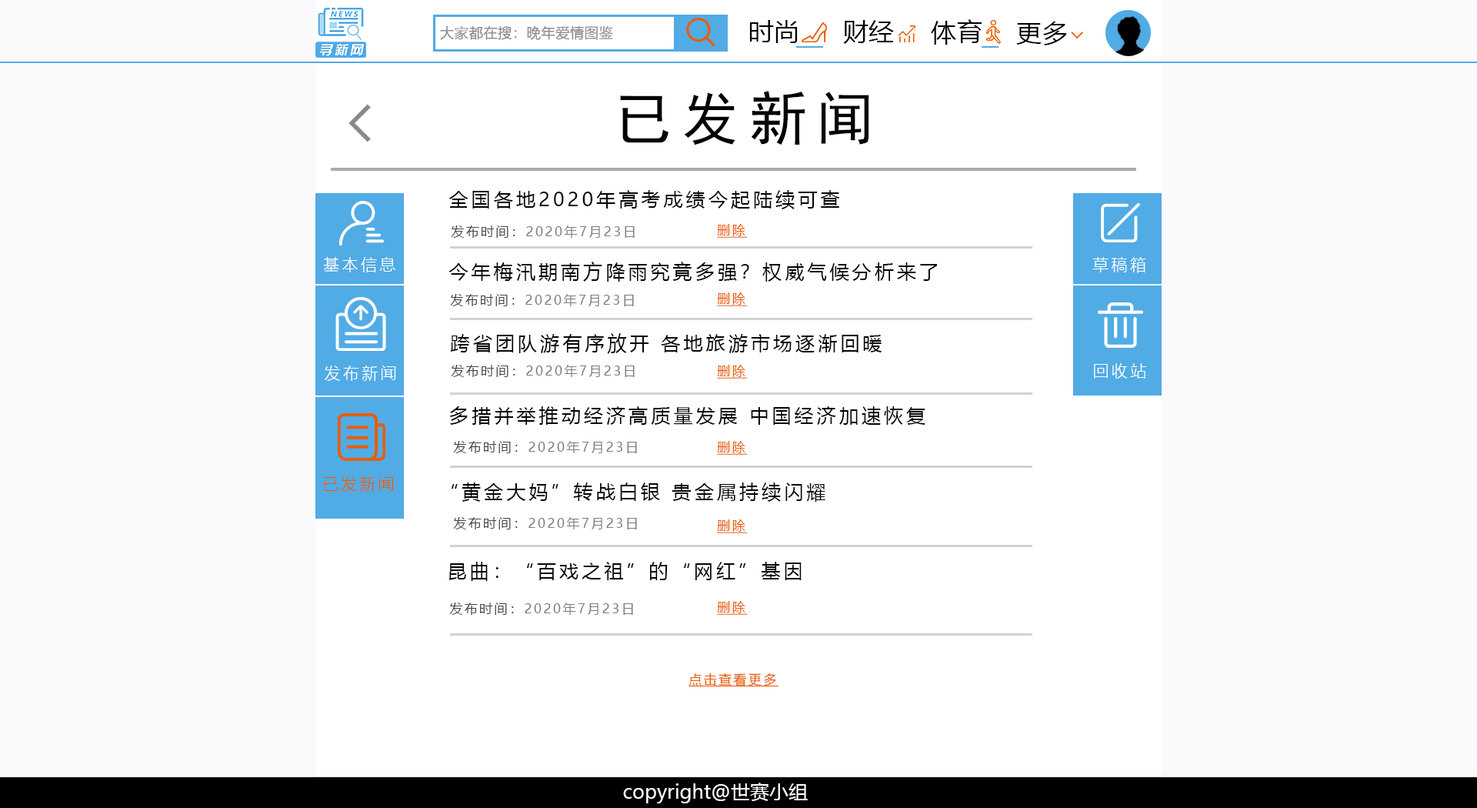
<style>
.page{position:relative;width:1477px;height:808px;background:#ffffff}
.page>*{position:absolute;margin:0}
.t1{font:14.1px "MicrosoftYaHeiLight";color:#8f8f8f;font-weight:bold}
.t2{font:25.6px "MicrosoftYaHei";color:#000000}
.t3{font:57.7px "SimHei";letter-spacing:0.165em;color:#000203}
.t4{font:19.2px "MicrosoftYaHei";letter-spacing:0.165em;color:#070401}
.t5{font:12.8px "MicrosoftYaHei";letter-spacing:0.165em;color:#807d7b}
.t6{font:12.8px "MicrosoftYaHei";letter-spacing:0.165em;color:#474544}
.t7{font:12.8px "MicrosoftYaHei";letter-spacing:0.165em;color:#eb5c00;text-decoration:underline}
.t8{font:16px "MicrosoftYaHeiLight";letter-spacing:0.165em;color:#fefefe}
.t9{font:16px "MicrosoftYaHeiLight";letter-spacing:0.165em;color:#ffffff}
.t10{font:16px "MicrosoftYaHeiLight";letter-spacing:0.165em;color:#ec5c00}
.t11{font:19.2px "MicrosoftYaHei";color:#fefefe}
</style>
<div class="page">
<p class="t1" style="left:440px;top:26px;width:173px;height:14px">大家都在搜：晚年爱情图鉴</p>
<p class="t2" style="left:749px;top:20px;width:49px;height:23px">时尚</p>
<p class="t2" style="left:843px;top:20px;width:51px;height:24px">财经</p>
<p class="t2" style="left:931px;top:19px;width:51px;height:26px">体育</p>
<p class="t2" style="left:1016px;top:22px;width:50px;height:23px">更多</p>
<p class="t3" style="left:620px;top:91px;width:249px;height:54px">已发新闻</p>
<p class="t4" style="left:448px;top:190px;width:392px;height:19px">全国各地2020年高考成绩今起陆续可查</p>
<p class="t5" style="left:451px;top:225px;width:183px;height:13px"><span class="t6">发布时间：</span>2020年7月23日</p>
<p class="t7" style="left:717px;top:224px;width:31px;height:14px">删除</p>
<p class="t8" style="left:323px;top:256px;width:72px;height:16px">基本信息</p>
<p class="t8" style="left:1092px;top:257px;width:54px;height:16px">草稿箱</p>
<p class="t4" style="left:448px;top:261px;width:489px;height:20px">今年梅汛期南方降雨究竟多强？权威气候分析来了</p>
<p class="t5" style="left:450px;top:294px;width:184px;height:12px"><span class="t6">发布时间：</span>2020年7月23日</p>
<p class="t7" style="left:717px;top:292px;width:31px;height:14px">删除</p>
<p class="t4" style="left:450px;top:333px;width:431px;height:21px">跨省团队游有序放开 各地旅游市场逐渐回暖</p>
<p class="t8" style="left:324px;top:365px;width:72px;height:16px">发布新闻</p>
<p class="t5" style="left:451px;top:365px;width:183px;height:12px"><span class="t6">发布时间：</span>2020年7月23日</p>
<p class="t7" style="left:717px;top:365px;width:31px;height:13px">删除</p>
<p class="t9" style="left:1094px;top:363px;width:52px;height:15px">回收站</p>
<p class="t4" style="left:449px;top:406px;width:476px;height:19px">多措并举推动经济高质量发展 中国经济加速恢复</p>
<p class="t5" style="left:453px;top:441px;width:184px;height:12px"><span class="t6">发布时间：</span>2020年7月23日</p>
<p class="t7" style="left:717px;top:441px;width:31px;height:14px">删除</p>
<p class="t10" style="left:323px;top:476px;width:71px;height:15px">已发新闻</p>
<p class="t4" style="left:451px;top:482px;width:374px;height:19px">“黄金大妈”转战白银 贵金属持续闪耀</p>
<p class="t5" style="left:453px;top:517px;width:184px;height:12px"><span class="t6">发布时间：</span>2020年7月23日</p>
<p class="t7" style="left:717px;top:519px;width:31px;height:14px">删除</p>
<p class="t4" style="left:448px;top:561px;width:353px;height:20px">昆曲：“百戏之祖”的“网红”基因</p>
<p class="t5" style="left:449px;top:602px;width:184px;height:12px"><span class="t6">发布时间：</span>2020年7月23日</p>
<p class="t7" style="left:717px;top:601px;width:31px;height:13px">删除</p>
<p class="t7" style="left:688px;top:672px;width:90px;height:15px">点击查看更多</p>
<p class="t11" style="left:623px;top:782px;width:185px;height:21px">copyright@世赛小组</p>
</div>
